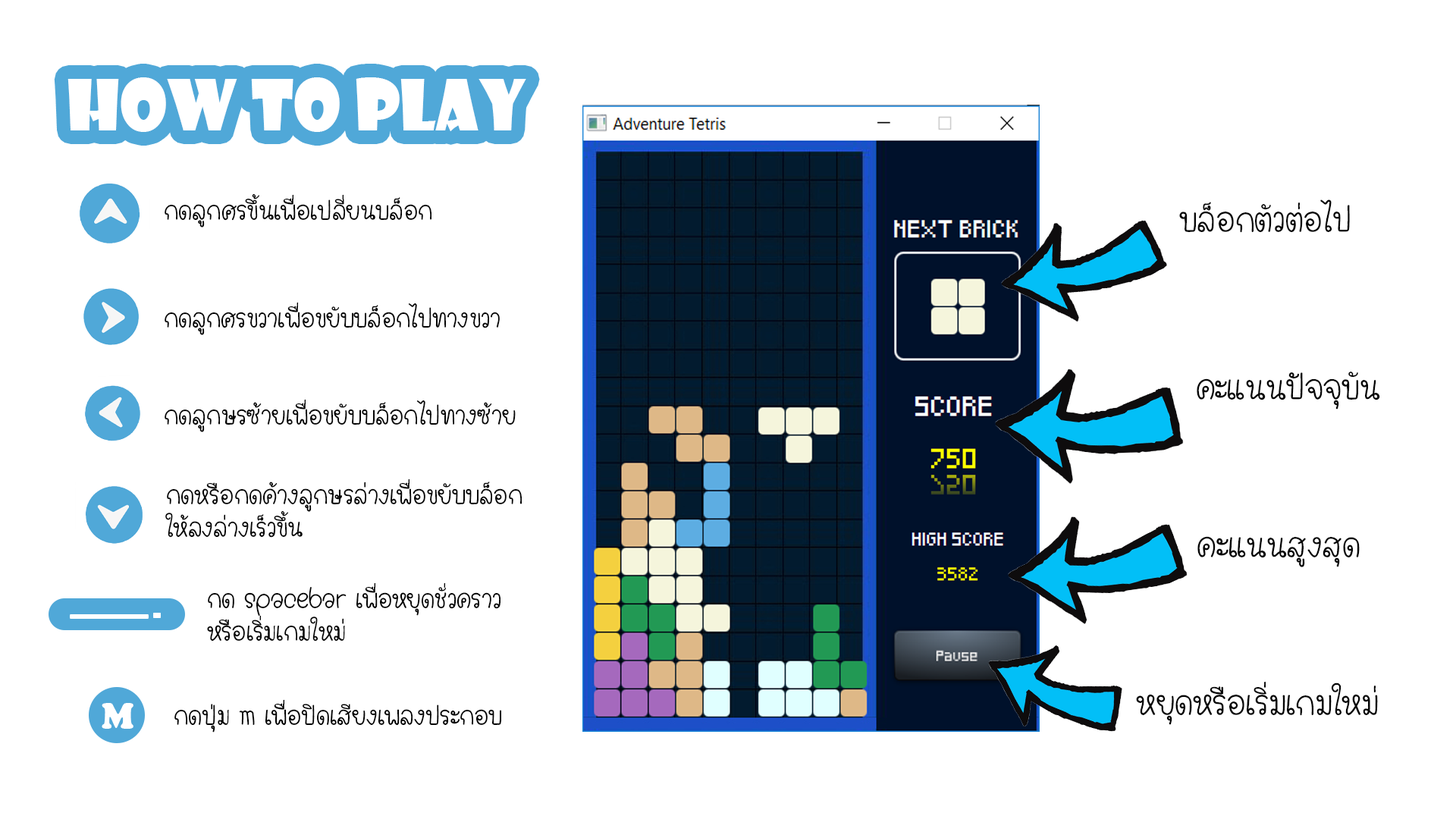
<style>
.page{position:relative;width:1456px;height:819px;background:#ffffff}
.page>*{position:absolute;margin:0}
.t1{font:68.2px "ShowcardGothic-Reg";color:#ffffff}
.t2{font:27.3px "SanamDeklenchaya";color:#050505}
.t3{font:36.4px "SanamDeklenchaya";color:#050505}
.t4{font:27.3px "SanamDeklenchaya";color:#000000}
.t5{font:36.4px "CooperBlack";color:#ffffff}
</style>
<div class="page">
<p class="t1" style="left:67px;top:77px;width:459px;height:55px">How to play</p>
<p class="t2" style="left:165px;top:193px;width:266px;height:34px">กดลูกศรขึ้นเพื่อเปลี่ยนบล็อก</p>
<p class="t3" style="left:1179px;top:199px;width:171px;height:34px">บล็อกตัวต่อไป</p>
<p class="t2" style="left:165px;top:302px;width:335px;height:33px">กดลูกศรขวาเพื่อขยับบล็อกไปทางขวา</p>
<p class="t3" style="left:1197px;top:372px;width:183px;height:37px">คะแนนปัจจุบัน</p>
<p class="t2" style="left:165px;top:399px;width:351px;height:33px">กดลูกษรซ้ายเพื่อขยับบล็อกไปทางซ้าย</p>
<p class="t2" style="left:165px;top:479px;width:357px;height:59px">กดหรือกดค้างลูกษรล่างเพื่อขยับบล็อก<br>ให้ลงล่างเร็วขึ้น</p>
<p class="t3" style="left:1197px;top:536px;width:163px;height:31px">คะแนนสูงสุด</p>
<p class="t2" style="left:207px;top:582px;width:293px;height:60px">กด spacebar เพื่อหยุดชั่วคราว<br>หรือเริ่มเกมใหม่</p>
<p class="t3" style="left:1136px;top:682px;width:242px;height:43px">หยุดหรือเริ่มเกมใหม่</p>
<p class="t4" style="left:174px;top:699px;width:327px;height:34px">กดปุ่ม m เพื่อปิดเสียงเพลงประกอบ</p>
<p class="t5" style="left:102px;top:703px;width:31px;height:26px">M</p>
</div>
